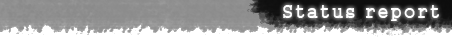
<style>
.page{position:relative;width:452px;height:50px;background:#ffffff}
.page>*{position:absolute;margin:0}
.t1{font:18px "Gungsuh";letter-spacing:0.1em;color:#ffffff}
</style>
<div class="page">
<p class="t1" style="left:283px;top:5px;width:156px;height:16px">Status report</p>
</div>
